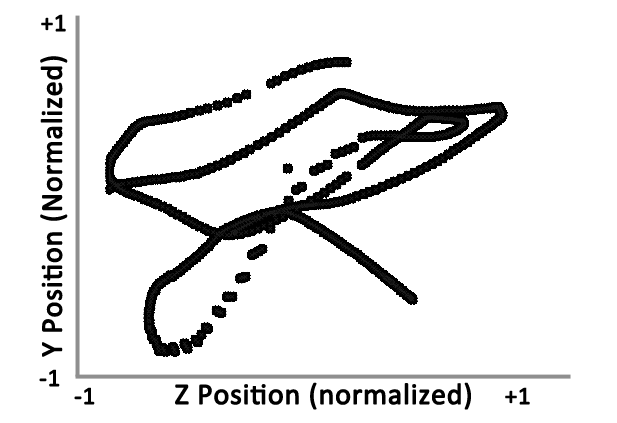
<style>
.page{position:relative;width:617px;height:423px;background:#ffffff}
.page>*{position:absolute;margin:0}
.t1{font:25px "Calibri";color:#000000;font-weight:bold}
.t2{font:30px "Calibri";color:#000000;font-weight:bold}
</style>
<div class="page">
<p class="t1" style="left:41px;top:14px;width:25px;height:18px">+1</p>
<p class="t2" style="left:40px;top:56px;width:28px;height:301px;rotate:-90deg">Y Position (Normalized)</p>
<p class="t1" style="left:39px;top:369px;width:21px;height:18px">-1</p>
<p class="t1" style="left:74px;top:387px;width:21px;height:18px">-1</p>
<p class="t2" style="left:175px;top:382px;width:296px;height:28px">Z Position (normalized)</p>
<p class="t1" style="left:505px;top:387px;width:25px;height:18px">+1</p>
</div>
